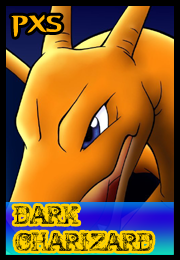
<style>
.page{position:relative;width:180px;height:260px}
.page>*{position:absolute;margin:0}
.t1{font:20px "Aegis";letter-spacing:-0.05em;color:#ffb400}
.t2{font:30px "AbusivePencil";letter-spacing:-0.05em;color:#000000}
</style>
<div class="page">
<p class="t1" style="left:11px;top:14px;width:51px;height:23px">pxs</p>
<p class="t2" style="left:14px;top:206px;width:65px;height:18px">DARK</p>
<p class="t2" style="left:15px;top:232px;width:138px;height:19px">CHARIZARD</p>
</div>
